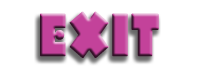
<style>
.page{position:relative;width:200px;height:70px;background:#ffffff}
.page>*{position:absolute;margin:0}
.t1{font:55px "ArbuckleFat";letter-spacing:0.03em;color:#c3429a;font-weight:bold;scale:0.91 1}
</style>
<div class="page">
<p class="t1" style="left:40px;top:11px;width:119px;height:47px">Exit</p>
</div>
